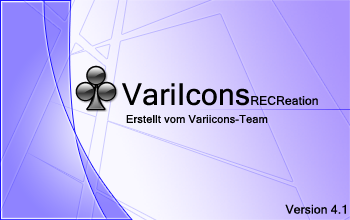
<style>
.page{position:relative;width:350px;height:220px}
.page>*{position:absolute;margin:0}
.t1{font:12px "MicrosoftSansSerif";letter-spacing:0.015em;color:#000000}
.t2{font:30px "MicrosoftSansSerif";letter-spacing:0.015em;color:#000000}
.t3{font:11px "MicrosoftSansSerif";letter-spacing:0.015em;color:#000000}
</style>
<div class="page">
<p class="t1" style="left:122px;top:83px;width:196px;height:23px"><span class="t2">VariIcons</span>RECReation</p>
<p class="t3" style="left:126px;top:115px;width:142px;height:9px">Erstellt vom Variicons-Team</p>
<p class="t1" style="left:285px;top:204px;width:61px;height:10px">Version 4.1</p>
</div>
